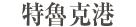
<style>
.page{position:relative;width:136px;height:27px;background:#ffffff}
.page>*{position:absolute;margin:0}
.t1{font:26px "RyuminPro-ExBold";color:#4c4843;scale:0.9 1}
</style>
<div class="page">
<p class="t1" style="left:22px;top:2px;width:93px;height:25px">特魯克港</p>
</div>
